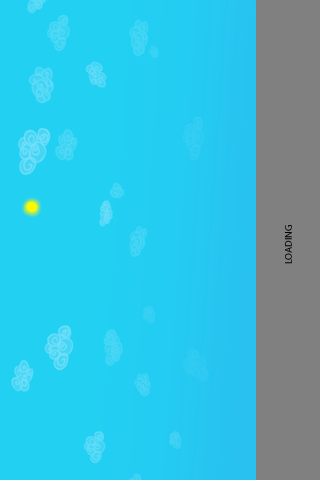
<style>
.page{position:relative;width:320px;height:480px;background:#22d0f2}
.page>*{position:absolute;margin:0}
.t1{font:10px "MyriadPro-Regular";color:#000000}
</style>
<div class="page">
<p class="t1" style="left:285px;top:225px;width:7px;height:39px;rotate:-90deg">LOADING</p>
</div>
